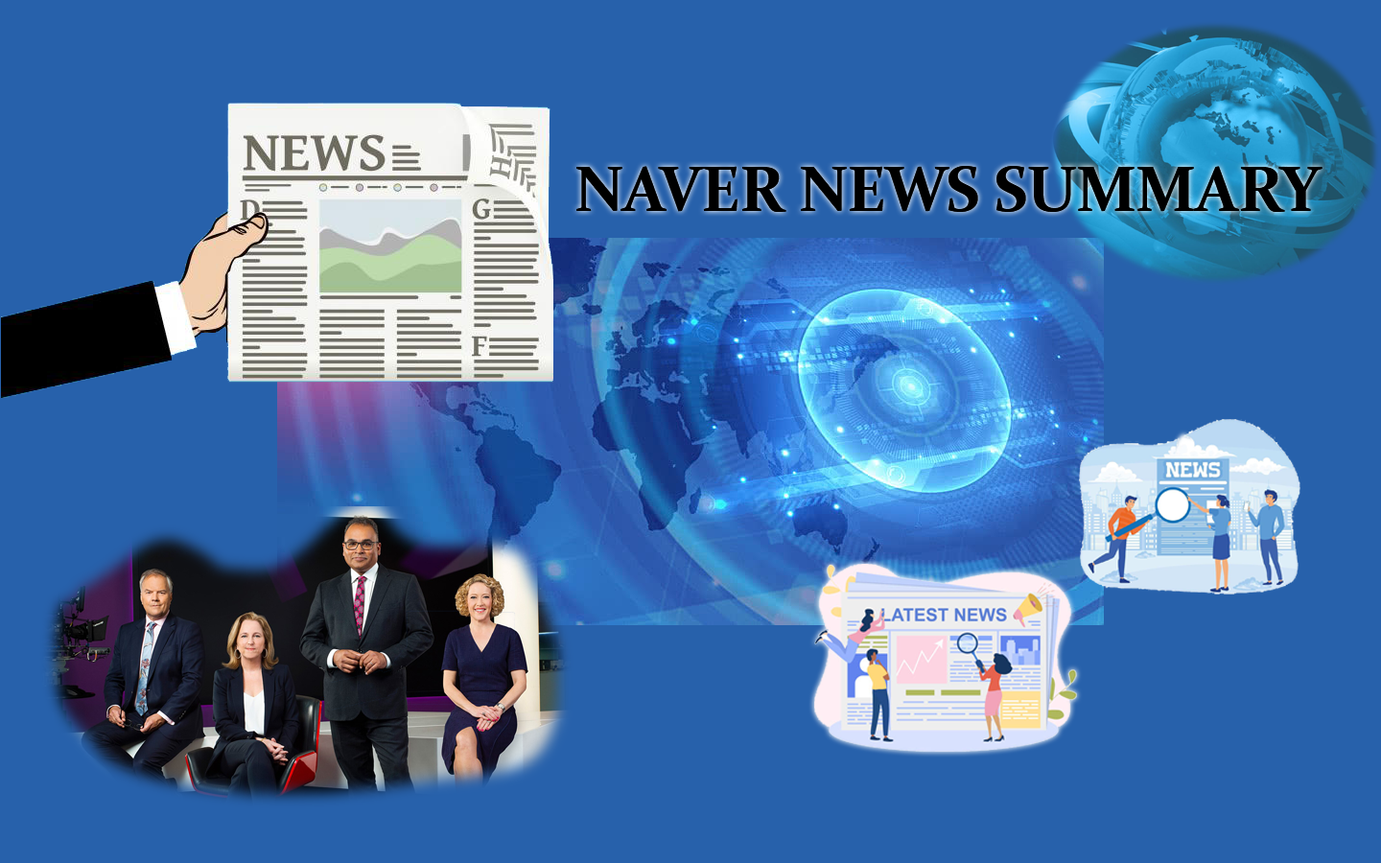
<style>
.page{position:relative;width:1381px;height:863px;background:#2761ab}
.page>*{position:absolute;margin:0}
.t1{font:65px "Constantia-Bold";letter-spacing:-0.015em;color:#000000}
</style>
<div class="page">
<p class="t1" style="left:576px;top:166px;width:747px;height:46px">NAVER NEWS SUMMARY</p>
</div>
